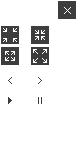
<style>
.page{position:relative;width:76px;height:150px;background:#ffffff}
.page>*{position:absolute;margin:0}
.t1{font:8.4px "FFFAquarius";color:#3d3d3d;scale:0.95 1}
</style>
<div class="page">
<p class="t1" style="left:8px;top:77px;width:4px;height:7px">&lt;</p>
<p class="t1" style="left:38px;top:77px;width:4px;height:7px;rotate:180deg">&lt;</p>
<p class="t1" style="left:8px;top:97px;width:4px;height:7px;rotate:180deg">&lt;</p>
</div>
